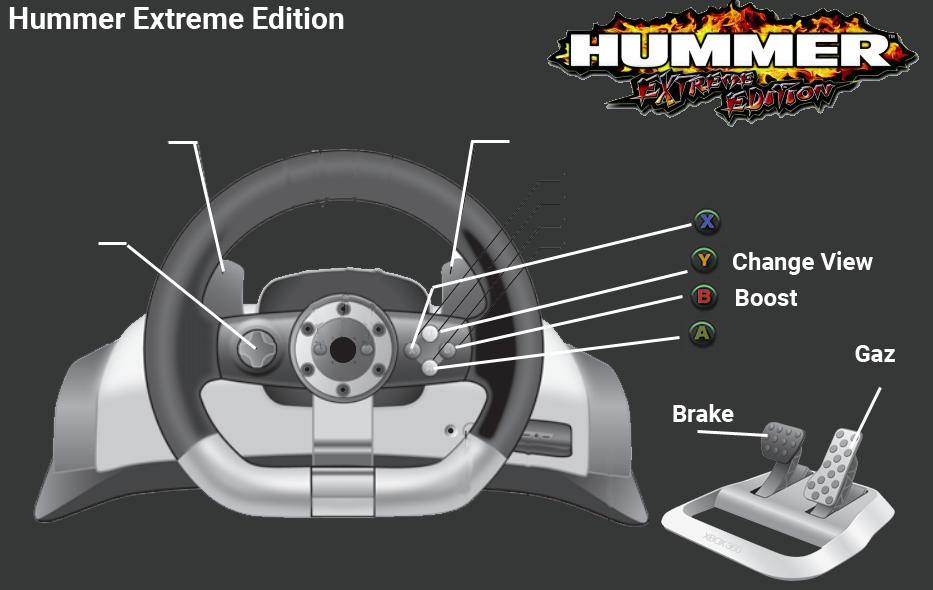
<style>
.page{position:relative;width:933px;height:590px;background:#363838}
.page>*{position:absolute;margin:0}
.t1{font:30px "Roboto-Bold";color:#ffffff}
.t2{font:24px "Roboto-Bold";color:#ffffff}
</style>
<div class="page">
<p class="t1" style="left:9px;top:6px;width:335px;height:23px">Hummer Extreme Edition</p>
<p class="t2" style="left:733px;top:251px;width:140px;height:24px">Change View</p>
<p class="t2" style="left:736px;top:289px;width:62px;height:17px">Boost</p>
<p class="t2" style="left:855px;top:345px;width:40px;height:17px">Gaz</p>
<p class="t2" style="left:673px;top:404px;width:61px;height:18px">Brake</p>
</div>
